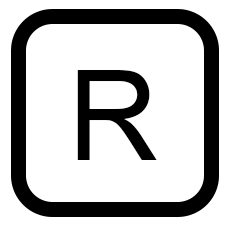
<style>
.page{position:relative;width:232px;height:229px;background:#ffffff}
.page>*{position:absolute;margin:0}
.t1{font:125px "ArialMT";color:#000000}
</style>
<div class="page">
<p class="t1" style="left:77px;top:70px;width:80px;height:90px">R</p>
</div>
